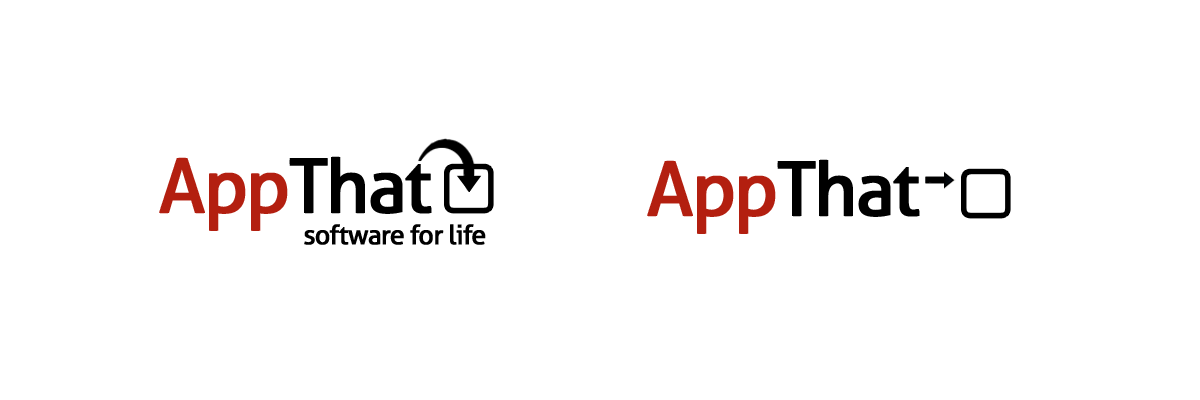
<style>
.page{position:relative;width:1200px;height:400px;background:#ffffff}
.page>*{position:absolute;margin:0}
.t1{font:75px "Aller";letter-spacing:-0.05em;color:#000000;font-weight:bold}
.t2{font:75px "Aller";letter-spacing:-0.05em;color:#b31f10;font-weight:bold}
.t3{font:45.8px "Aller";letter-spacing:-0.05em;color:#000000;font-weight:bold}
</style>
<div class="page">
<p class="t1" style="left:159px;top:156px;width:273px;height:75px"><span class="t2">App</span>That</p>
<p class="t1" style="left:647px;top:159px;width:273px;height:75px"><span class="t2">App</span>That</p>
<p class="t3" style="left:304px;top:224px;width:182px;height:21px">software for life</p>
</div>
